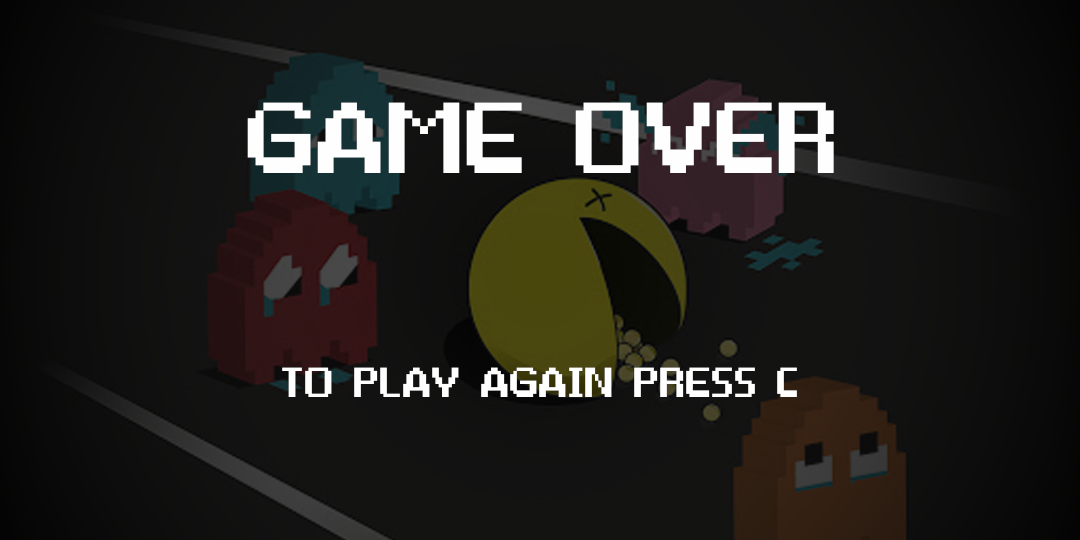
<style>
.page{position:relative;width:1080px;height:540px}
.page>*{position:absolute;margin:0}
.t1{font:250px "Game-Over";color:#fefefe}
.t2{font:104.2px "Game-Over";color:#fefefe}
</style>
<div class="page">
<p class="t1" style="left:247px;top:102px;width:587px;height:71px">GAME  OVER</p>
<p class="t2" style="left:282px;top:367px;width:515px;height:30px">TO  PLAY  AGAIN  PRESS  C</p>
</div>
